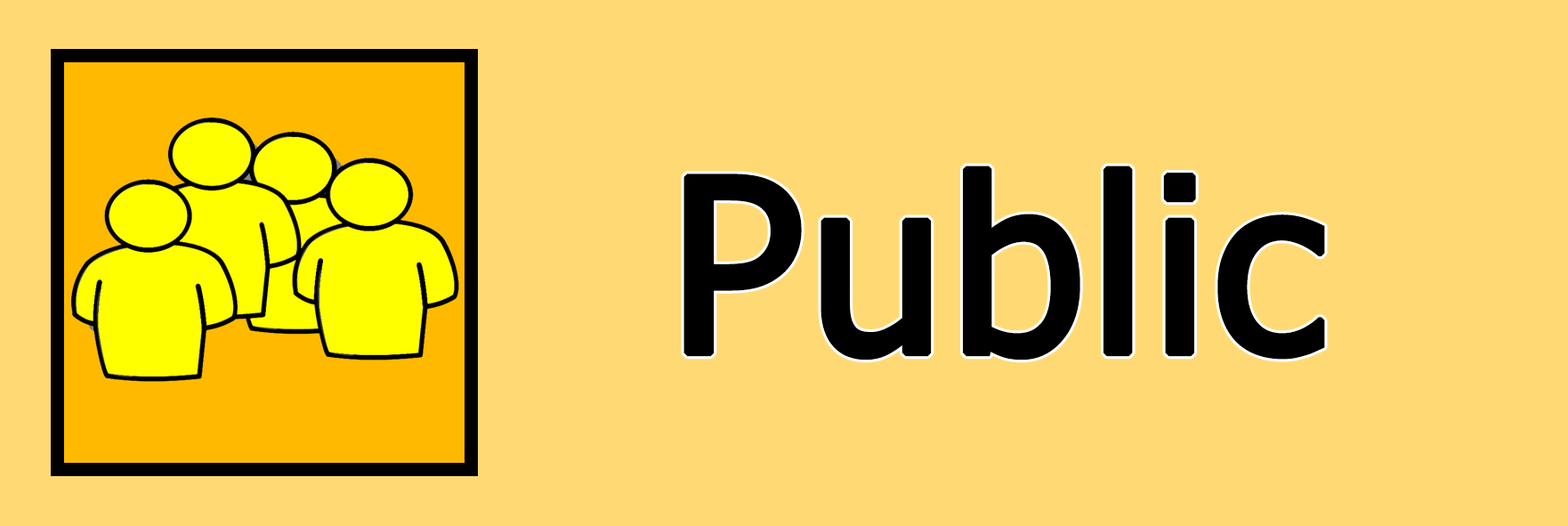
<style>
.page{position:relative;width:1568px;height:526px;background:#ffda74}
.page>*{position:absolute;margin:0}
.t1{font:241.6px "Tahoma";color:#000000;font-weight:bold}
</style>
<div class="page">
<p class="t1" style="left:683px;top:166px;width:642px;height:194px">Public</p>
</div>
